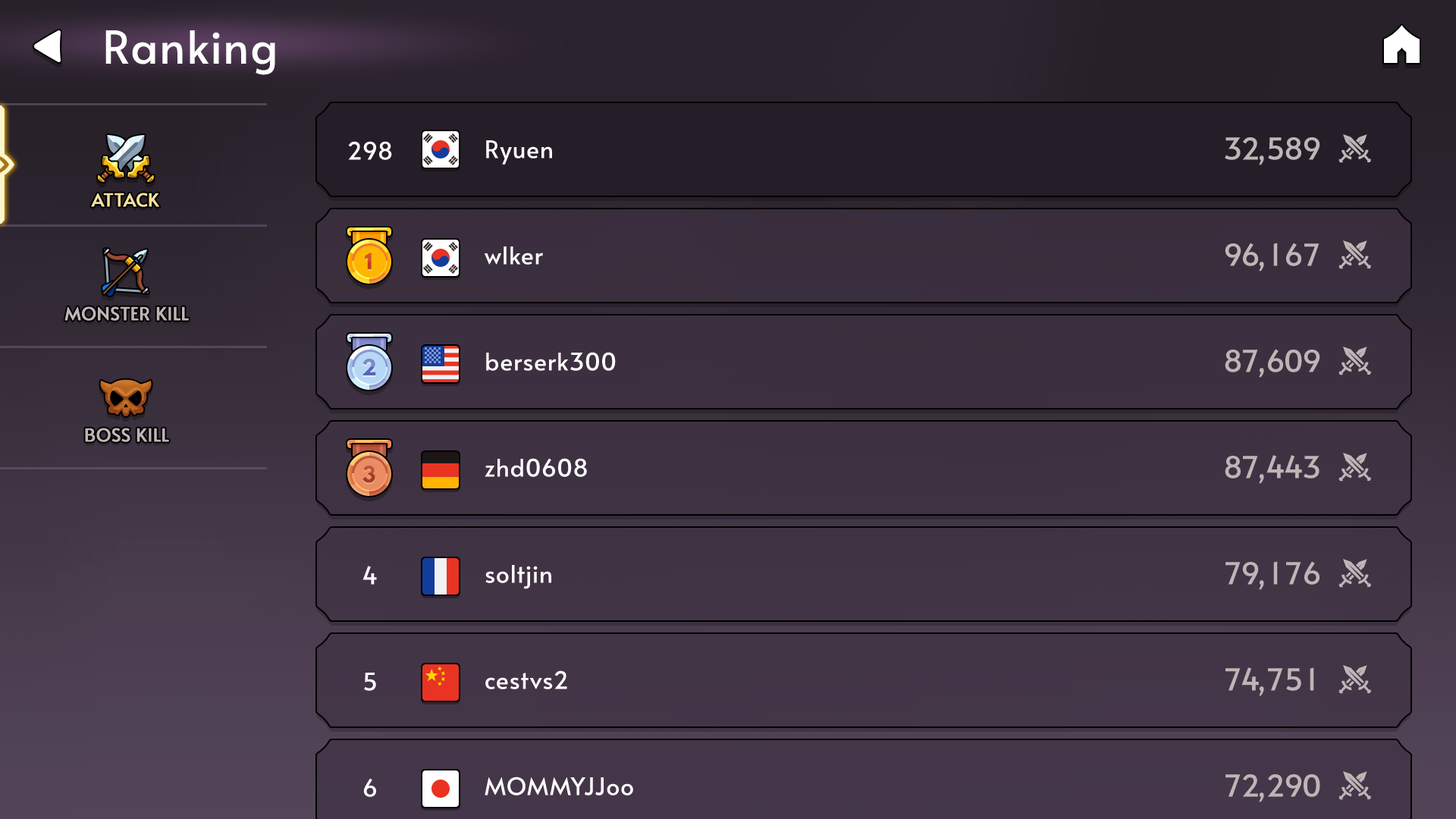
<style>
.page{position:relative;width:1456px;height:819px}
.page>*{position:absolute;margin:0}
.t1{font:45.5px "Alata-Regular";color:#ffffff}
.t2{font:30.3px/106.2px "Alata-Regular";letter-spacing:-0.01em;color:#beb5b6}
.t3{font:24.3px "Alata-Regular";letter-spacing:-0.01em;color:#ffffff}
.t4{font:24.3px/106.2px "Alata-Regular";letter-spacing:-0.01em;color:#ffffff}
.t5{font:18.2px "Alata-Regular";color:#f6e19c;text-transform:uppercase;font-weight:bold}
.t6{font:18.2px "Alata-Regular";color:#beb5b6;text-transform:uppercase;font-weight:bold}
</style>
<div class="page">
<p class="t1" style="left:105px;top:30px;width:170px;height:45px">Ranking</p>
<p class="t2" style="left:1225px;top:137px;width:16px;height:660px;text-align:center">3<br>9<br>8<br>8<br>7<br>7<br>7</p>
<p class="t2" style="left:1241px;top:137px;width:18px;height:660px;text-align:center">2<br>6<br>7<br>7<br>9<br>4<br>2</p>
<p class="t2" style="left:1266px;top:137px;width:18px;height:660px;text-align:center">5<br>1<br>6<br>4<br>1<br>7<br>2</p>
<p class="t2" style="left:1285px;top:137px;width:17px;height:660px;text-align:center">8<br>6<br>0<br>4<br>7<br>5<br>9</p>
<p class="t2" style="left:1304px;top:137px;width:16px;height:660px;text-align:center">9<br>7<br>9<br>3<br>6<br>1<br>0</p>
<p class="t3" style="left:348px;top:141px;width:44px;height:19px">298</p>
<p class="t4" style="left:484px;top:140px;width:149px;height:655px">Ryuen<br>wlker<br>berserk300<br>zhd0608<br>soltjin<br>cestvs2<br>MOMMYJJoo</p>
<p class="t2" style="left:1259px;top:155px;width:5px;height:647px;text-align:center">,<br>,<br>,<br>,<br>,<br>,<br>,</p>
<p class="t5" style="left:91px;top:193px;width:69px;height:14px">Attack</p>
<p class="t6" style="left:64px;top:306px;width:125px;height:15px">Monster Kill</p>
<p class="t6" style="left:85px;top:428px;width:84px;height:14px">Boss kill</p>
</div>
